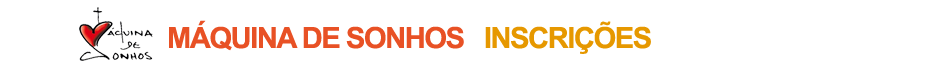
<style>
.page{position:relative;width:940px;height:70px;background:#ffffff}
.page>*{position:absolute;margin:0}
.t1{font:29.2px "Arial-BoldMT";letter-spacing:-0.05em;color:#e85125}
.t2{font:29.2px "Arial-BoldMT";letter-spacing:-0.05em;color:#e69800}
</style>
<div class="page">
<p class="t1" style="left:169px;top:20px;width:295px;height:31px">MÁQUINA DE SONHOS</p>
<p class="t2" style="left:485px;top:21px;width:166px;height:33px">INSCRIÇÕES</p>
</div>
